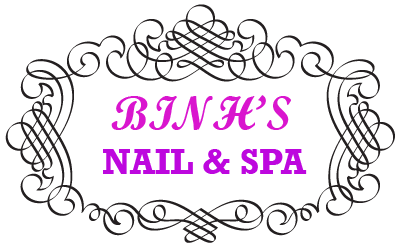
<style>
.page{position:relative;width:400px;height:250px;background:#ffffff}
.page>*{position:absolute;margin:0}
.t1{font:48px "ScriptMTBold";color:#d915ce}
.t2{font:36px "Rockwell-Bold";color:#bd07de}
</style>
<div class="page">
<p class="t1" style="left:111px;top:95px;width:180px;height:35px">BINH’S</p>
<p class="t2" style="left:103px;top:149px;width:204px;height:25px">NAIL &amp; SPA</p>
</div>
